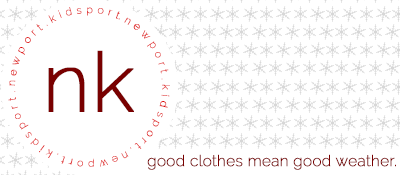
<style>
.page{position:relative;width:400px;height:175px;background:#ffffff}
.page>*{position:absolute;margin:0}
.t1{font:82.4px "Raleway-ExtraLight";color:#790000;font-weight:bold}
.t2{font:15.6px "Raleway-ExtraLight";color:#790000;font-weight:bold}
</style>
<div class="page">
<p class="t1" style="left:48px;top:50px;width:86px;height:62px">nk</p>
<p class="t2" style="left:147px;top:154px;width:249px;height:16px">good clothes mean good weather.</p>
</div>
